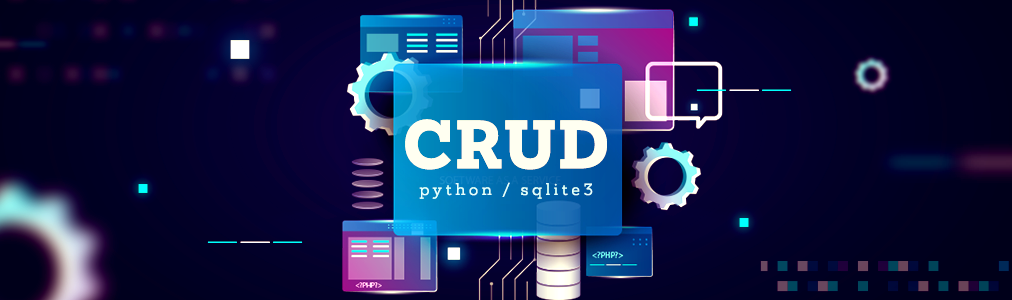
<style>
.page{position:relative;width:1012px;height:300px}
.page>*{position:absolute;margin:0}
.t1{font:63px "Mokoko-ExtraBold";letter-spacing:0.04em;color:#f4f4f4;text-transform:uppercase}
.t2{font:15.2px "Mokoko-Regular";letter-spacing:0.24em;color:#e4ffff}
</style>
<div class="page">
<p class="t1" style="left:405px;top:119px;width:202px;height:51px">CRUD</p>
<p class="t2" style="left:419px;top:182px;width:174px;height:17px">python / sqlite3</p>
</div>
